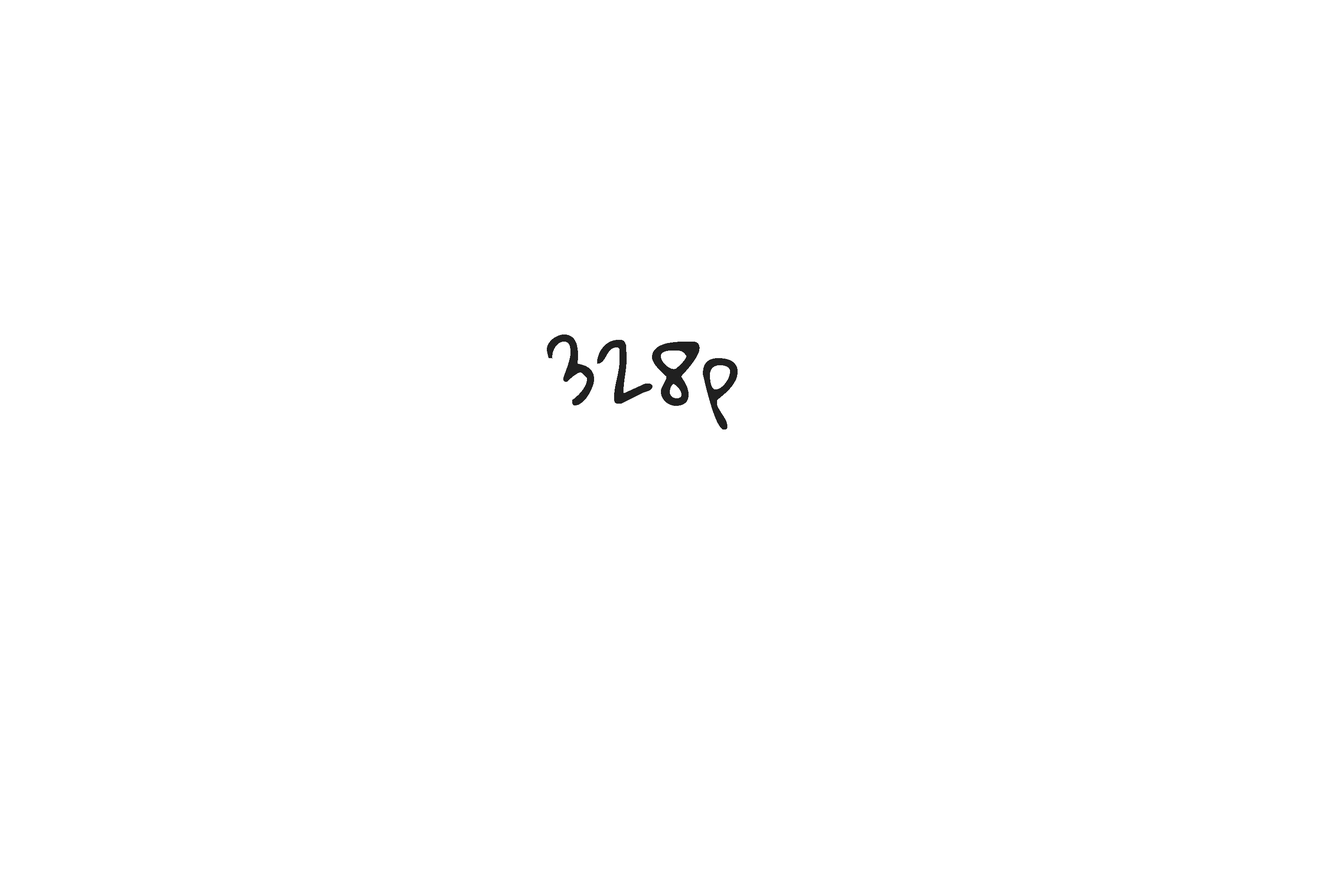
<style>
.page{position:relative;width:1337px;height:892px;background:#ffffff}
.page>*{position:absolute;margin:0}
.t1{font:78px "GloriaHallelujah";color:#202020}
</style>
<div class="page">
<p class="t1" style="left:547px;top:334px;width:191px;height:95px">328p</p>
</div>
